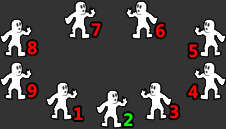
<style>
.page{position:relative;width:226px;height:129px;background:#333333}
.page>*{position:absolute;margin:0}
.t1{font:18px "MicrosoftPhagsPa-Bold";color:#ff0000}
.t2{font:18px "MicrosoftPhagsPa-Bold";color:#00ff00}
</style>
<div class="page">
<p class="t1" style="left:91px;top:23px;width:10px;height:13px">7</p>
<p class="t1" style="left:156px;top:24px;width:9px;height:14px">6</p>
<p class="t1" style="left:27px;top:41px;width:10px;height:14px">8</p>
<p class="t1" style="left:189px;top:44px;width:9px;height:14px">5</p>
<p class="t1" style="left:27px;top:84px;width:10px;height:14px">9</p>
<p class="t1" style="left:188px;top:85px;width:10px;height:13px">4</p>
<p class="t1" style="left:74px;top:107px;width:9px;height:13px">1</p>
<p class="t2" style="left:124px;top:113px;width:9px;height:13px">2</p>
<p class="t1" style="left:170px;top:105px;width:9px;height:14px">3</p>
</div>
